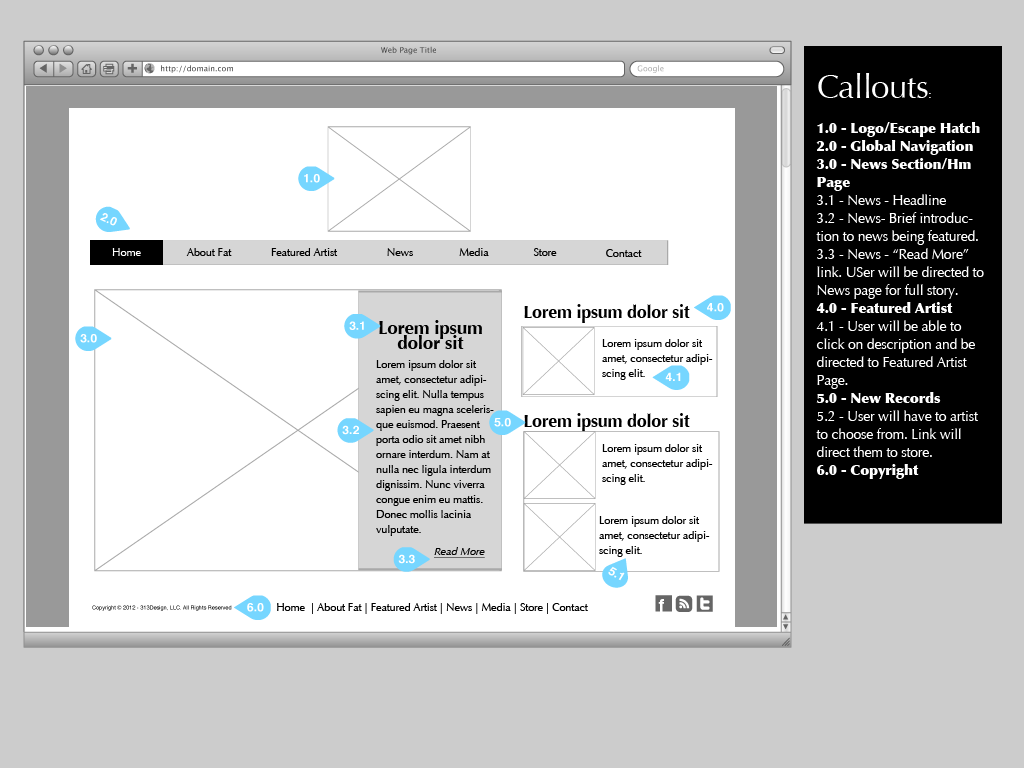
<style>
.page{position:relative;width:1024px;height:768px;background:#ffffff}
.page>*{position:absolute;margin:0}
.t1{font:14px/18px "Optima-Regular";letter-spacing:-0.015em;color:#ffffff}
.t2{font:33px/17px "Optima-Regular";letter-spacing:-0.015em;color:#ffffff}
.t3{font:12px/17px "Optima-Regular";letter-spacing:-0.015em;color:#ffffff}
.t4{font:14px/18px "Optima-ExtraBlack";letter-spacing:-0.015em;color:#ffffff}
.t5{font:11px "Optima-Regular";letter-spacing:-0.015em;color:#ffffff}
.t6{font:11px "Optima-Regular";letter-spacing:-0.015em;color:#000000}
.t7{font:18px "Optima-Bold";letter-spacing:-0.015em;color:#000000}
.t8{font:19px "Optima-Bold";letter-spacing:-0.015em;color:#000000}
.t9{font:11px/15px "Optima-Regular";letter-spacing:-0.015em;color:#000000}
.t10{font:11px "Optima-Italic";letter-spacing:-0.015em;color:#000000;text-decoration:underline}
</style>
<div class="page">
<p class="t1" style="left:816px;top:73px;width:168px;height:406px"><span class="t2">Callouts</span><span class="t3">:<br><br></span><span class="t4">1.0 - Logo/Escape Hatch<br>2.0 - Global Navigation<br>3.0 - News Section/Hm Page<br></span>3.1 - News - Headline<br>3.2 - News- Brief introduction to news being featured.<br>3.3 - News - “Read More” link. USer will be directed to News page for full story.<br><span class="t4">4.0 - Featured Artist <br></span>4.1 - User will be able to click on description and be directed to Featured Artist Page.<br><span class="t4">5.0 - New Records<br></span>5.2 - User will have to artist to choose from. Link will direct them to store.<br><span class="t4">6.0 - Copyright</span></p>
<p class="t5" style="left:112px;top:248px;width:29px;height:8px">Home</p>
<p class="t6" style="left:186px;top:248px;width:46px;height:8px">About Fat</p>
<p class="t6" style="left:271px;top:248px;width:67px;height:8px">Featured Artist</p>
<p class="t6" style="left:387px;top:248px;width:26px;height:8px">News</p>
<p class="t6" style="left:459px;top:248px;width:30px;height:8px">Media</p>
<p class="t6" style="left:533px;top:248px;width:24px;height:8px">Store</p>
<p class="t6" style="left:606px;top:249px;width:36px;height:8px">Contact</p>
<p class="t7" style="left:524px;top:304px;width:166px;height:19px">Lorem ipsum dolor sit amet</p>
<p class="t8" style="left:379px;top:320px;width:103px;height:29px">Lorem ipsum dolor sit</p>
<p class="t9" style="left:602px;top:339px;width:111px;height:41px">Lorem ipsum dolor sit amet, consectetur adipiscing elit.</p>
<p class="t9" style="left:376px;top:360px;width:118px;height:176px">Lorem ipsum dolor sit amet, consectetur adipiscing elit. Nulla tempus sapien eu magna scelerisque euismod. Praesent porta odio sit amet nibh ornare interdum. Nam at nulla nec ligula interdum dignissim. Nunc viverra congue enim eu mattis. Donec mollis lacinia vulputate.</p>
<p class="t7" style="left:524px;top:413px;width:166px;height:19px">Lorem ipsum dolor sit amet</p>
<p class="t9" style="left:602px;top:444px;width:111px;height:41px">Lorem ipsum dolor sit amet, consectetur adipiscing elit.</p>
<p class="t9" style="left:599px;top:516px;width:111px;height:41px">Lorem ipsum dolor sit amet, consectetur adipiscing elit.</p>
<p class="t10" style="left:434px;top:547px;width:51px;height:11px">Read More</p>
<p class="t6" style="left:277px;top:603px;width:311px;height:11px">Home  | About Fat | Featured Artist | News | Media | Store | Contact</p>
</div>
